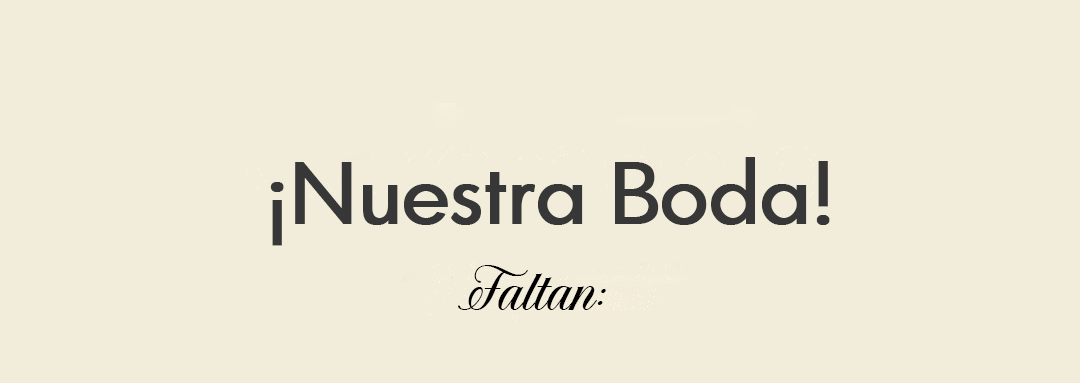
<style>
.page{position:relative;width:1080px;height:383px;background:#f2ecda}
.page>*{position:absolute;margin:0}
.t1{font:81.3px "GraphicusDT-Regular";color:#373737;font-weight:bold}
.t2{font:46.3px "SolistariaScript-Italic";color:#000000}
</style>
<div class="page">
<p class="t1" style="left:270px;top:157px;width:560px;height:89px">¡Nuestra Boda!</p>
<p class="t2" style="left:458px;top:265px;width:148px;height:45px">Faltan:</p>
</div>
